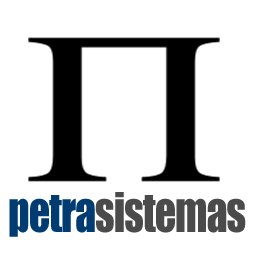
<style>
.page{position:relative;width:256px;height:256px;background:#ffffff}
.page>*{position:absolute;margin:0}
.t1{font:50.4px "Impact";letter-spacing:-0.025em;color:#4b4b4b;scale:0.83 1}
.t2{font:50.4px "Impact";letter-spacing:-0.025em;color:#003c71;scale:0.83 1}
</style>
<div class="page">
<p class="t1" style="left:9px;top:192px;width:237px;height:45px"><span class="t2">petra</span>sistemas</p>
</div>
